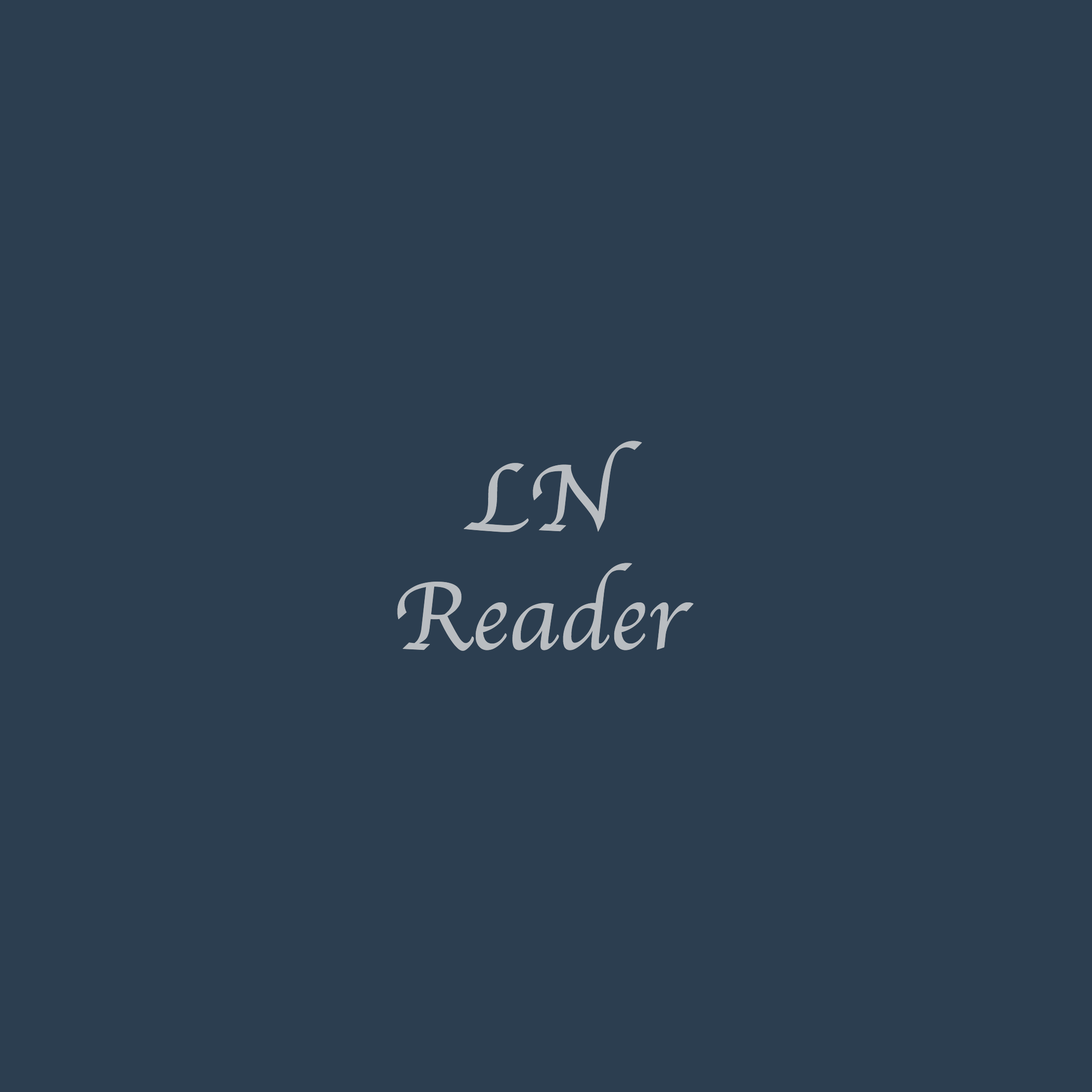
<style>
.page{position:relative;width:1092px;height:1092px;background:#2c3e50}
.page>*{position:absolute;margin:0}
.t1{font:98.9px "Apple-Chancery";color:#b9bdc1}
</style>
<div class="page">
<p class="t1" style="left:397px;top:441px;width:297px;height:210px;text-align:center">LN<br>Reader</p>
</div>
